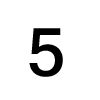
<style>
.page{position:relative;width:100px;height:100px;background:#ffffff}
.page>*{position:absolute;margin:0}
.t1{font:72px "Shruti-Bold";color:#000000}
</style>
<div class="page">
<p class="t1" style="left:29px;top:28px;width:34px;height:49px">5</p>
</div>
